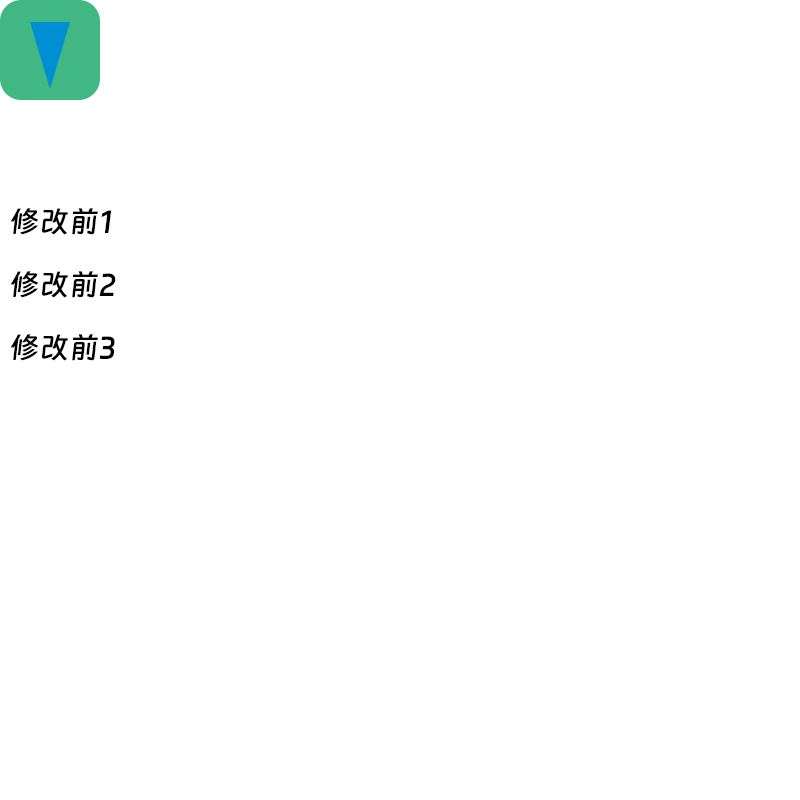
<style>
.page{position:relative;width:800px;height:800px;background:#ffffff}
.page>*{position:absolute;margin:0}
.t1{font:30px "DingTalk-JinBuTi";color:#000000}
</style>
<div class="page">
<p class="t1" style="left:10px;top:208px;width:102px;height:27px">修改前1</p>
<p class="t1" style="left:10px;top:271px;width:106px;height:27px">修改前2</p>
<p class="t1" style="left:10px;top:334px;width:105px;height:27px">修改前3</p>
</div>
